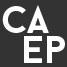
<style>
.page{position:relative;width:67px;height:67px;background:#333333}
.page>*{position:absolute;margin:0}
.t1{font:38.4px "BaronNeueBold";color:#ffffff}
.t2{font:38.6px "BaronNeueBold";color:#ffffff}
</style>
<div class="page">
<p class="t1" style="left:2px;top:5px;width:47px;height:28px">ca</p>
<p class="t2" style="left:24px;top:36px;width:41px;height:27px">ep</p>
</div>
